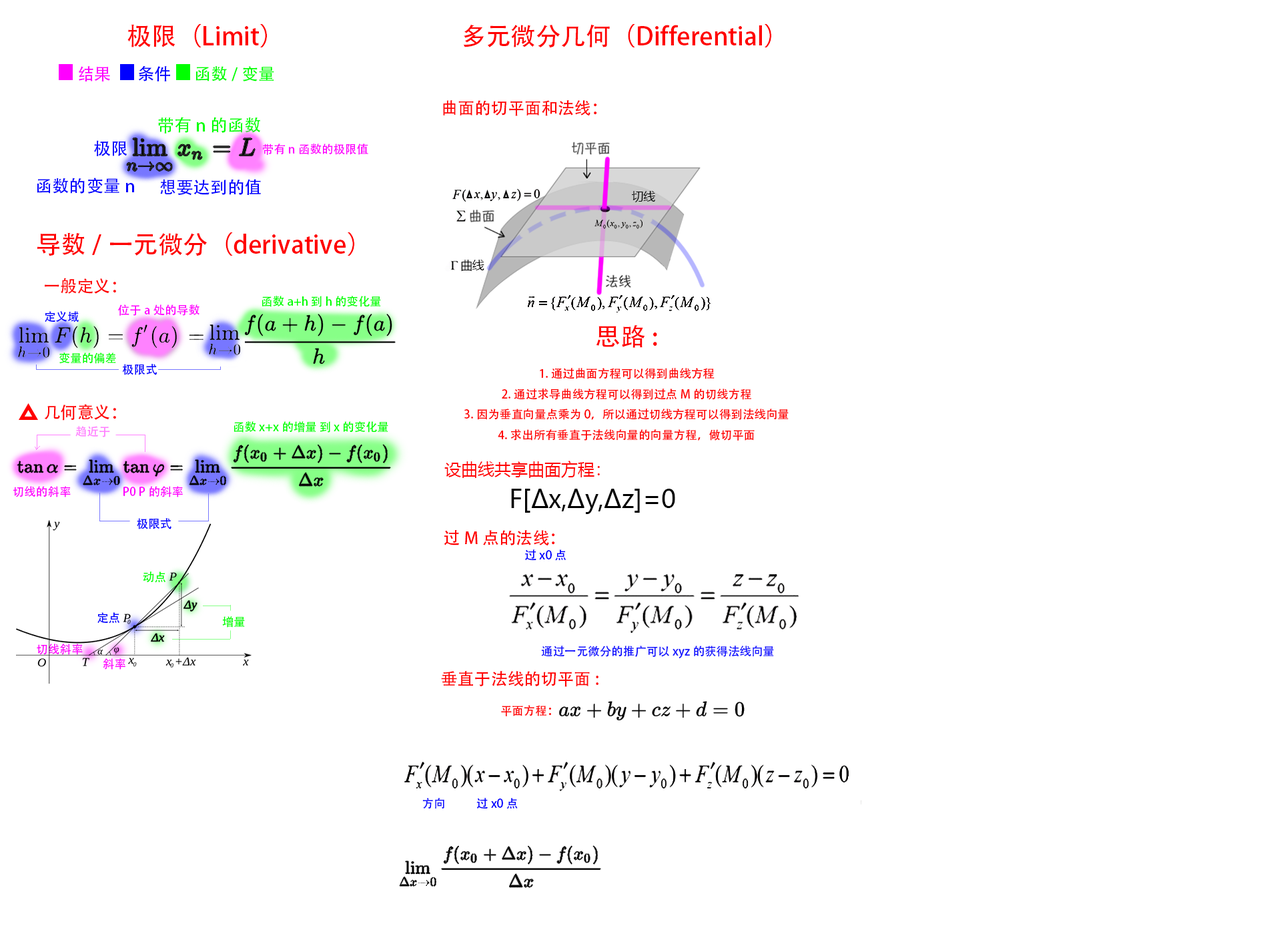
<style>
.page{position:relative;width:1261px;height:946px;background:#ffffff}
.page>*{position:absolute;margin:0}
.t1{font:25px "AdobeHeitiStd-Regular";color:#ff0000}
.t2{font:16.7px "AdobeHeitiStd-Regular";color:#ff00ff}
.t3{font:16.7px "AdobeHeitiStd-Regular";color:#0000ff}
.t4{font:16.7px "AdobeHeitiStd-Regular";color:#00ff00}
.t5{font:16.7px "AdobeHeitiStd-Regular";color:#ff0000}
.t6{font:17.1px "AdobeHeitiStd-Regular";color:#00ff00}
.t7{font:17.1px "AdobeHeitiStd-Regular";color:#0000ff}
.t8{font:11.7px "AdobeHeitiStd-Regular";color:#ff00ff}
.t9{font:11.7px "MicrosoftYaHeiUI";color:#000000}
.t10{font:11.7px "AdobeHeitiStd-Regular";color:#00ff00}
.t11{font:11.7px "AdobeHeitiStd-Regular";color:#0000ff}
.t12{font:11.7px "AdobeHeitiStd-Regular";color:#ff0000}
.t13{font:11.7px "AdobeHeitiStd-Regular";color:#ff82ff}
.t14{font:16.7px "MicrosoftYaHeiUI";color:#ff0000}
.t15{font:25px "MicrosoftYaHeiUI";color:#000000}
.t16{font:11.7px "AdobeHeitiStd-Regular";color:#1010ff}
</style>
<div class="page">
<p class="t1" style="left:127px;top:24px;width:140px;height:23px">极限（Limit）</p>
<p class="t1" style="left:463px;top:24px;width:308px;height:23px">多元微分几何（Differential）</p>
<p class="t2" style="left:79px;top:66px;width:31px;height:15px">结果</p>
<p class="t3" style="left:138px;top:66px;width:32px;height:15px">条件</p>
<p class="t4" style="left:196px;top:66px;width:78px;height:15px">函数/变量</p>
<p class="t5" style="left:443px;top:100px;width:154px;height:16px">曲面的切平面和法线：</p>
<p class="t6" style="left:158px;top:117px;width:103px;height:16px">带有n的函数</p>
<p class="t7" style="left:94px;top:140px;width:33px;height:16px">极限</p>
<p class="t8" style="left:262px;top:143px;width:106px;height:12px">带有n函数的极限值</p>
<p class="t7" style="left:37px;top:177px;width:97px;height:17px">函数的变量n</p>
<p class="t7" style="left:160px;top:179px;width:101px;height:17px">想要达到的值</p>
<p class="t9" style="left:632px;top:191px;width:23px;height:11px">切线</p>
<p class="t1" style="left:37px;top:232px;width:317px;height:24px">导数/一元微分（derivative）</p>
<p class="t9" style="left:461px;top:260px;width:23px;height:11px">曲线</p>
<p class="t5" style="left:45px;top:278px;width:71px;height:16px">一般定义：</p>
<p class="t8" style="left:117px;top:304px;width:83px;height:12px">位于a处的导数</p>
<p class="t10" style="left:262px;top:296px;width:119px;height:11px">函数a+h 到 h 的变化量</p>
<p class="t11" style="left:45px;top:311px;width:34px;height:11px">定义域</p>
<p class="t12" style="left:464px;top:325px;width:325px;height:115px;text-align:center"><span class="t1">思路:</span> <br>1.通过曲面方程可以得到曲线方程<br>2.通过求导曲线方程可以得到过点M的切线方程<br>3.因为垂直向量点乘为0，所以通过切线方程可以得到法线向量<br>4.求出所有垂直于法线向量的向量方程，做切平面</p>
<p class="t10" style="left:59px;top:352px;width:57px;height:12px">变量的偏差</p>
<p class="t11" style="left:122px;top:364px;width:35px;height:11px">极限式</p>
<p class="t5" style="left:44px;top:404px;width:72px;height:16px">几何意义：</p>
<p class="t13" style="left:75px;top:426px;width:35px;height:11px">趋近于</p>
<p class="t10" style="left:234px;top:421px;width:154px;height:11px">函数x+x的增量 到 x 的变化量</p>
<p class="t14" style="left:444px;top:460px;width:156px;height:18px">设曲线共享曲面方程：</p>
<p class="t8" style="left:13px;top:486px;width:58px;height:11px">切线的斜率</p>
<p class="t8" style="left:123px;top:486px;width:60px;height:11px">P0 P的斜率</p>
<p class="t15" style="left:511px;top:488px;width:164px;height:26px">F[∆x,∆y,∆z]=0</p>
<p class="t11" style="left:137px;top:518px;width:34px;height:11px">极限式</p>
<p class="t5" style="left:444px;top:530px;width:111px;height:15px">过M点的法线 ：</p>
<p class="t11" style="left:525px;top:549px;width:42px;height:12px">过x0点</p>
<p class="t10" style="left:143px;top:571px;width:23px;height:12px">动点</p>
<p class="t11" style="left:97px;top:612px;width:23px;height:11px">定点</p>
<p class="t10" style="left:222px;top:616px;width:23px;height:11px">增量</p>
<p class="t8" style="left:37px;top:643px;width:46px;height:12px">切线斜率</p>
<p class="t16" style="left:541px;top:645px;width:233px;height:14px">通过一元微分的推广可以xyz的获得法线向量</p>
<p class="t8" style="left:103px;top:658px;width:22px;height:11px">斜率</p>
<p class="t5" style="left:441px;top:671px;width:158px;height:16px">垂直于法线的切平面:</p>
<p class="t12" style="left:501px;top:705px;width:50px;height:11px">平面方程：</p>
<p class="t16" style="left:422px;top:797px;width:22px;height:12px">方向</p>
<p class="t11" style="left:476px;top:797px;width:42px;height:12px">过x0点</p>
</div>
